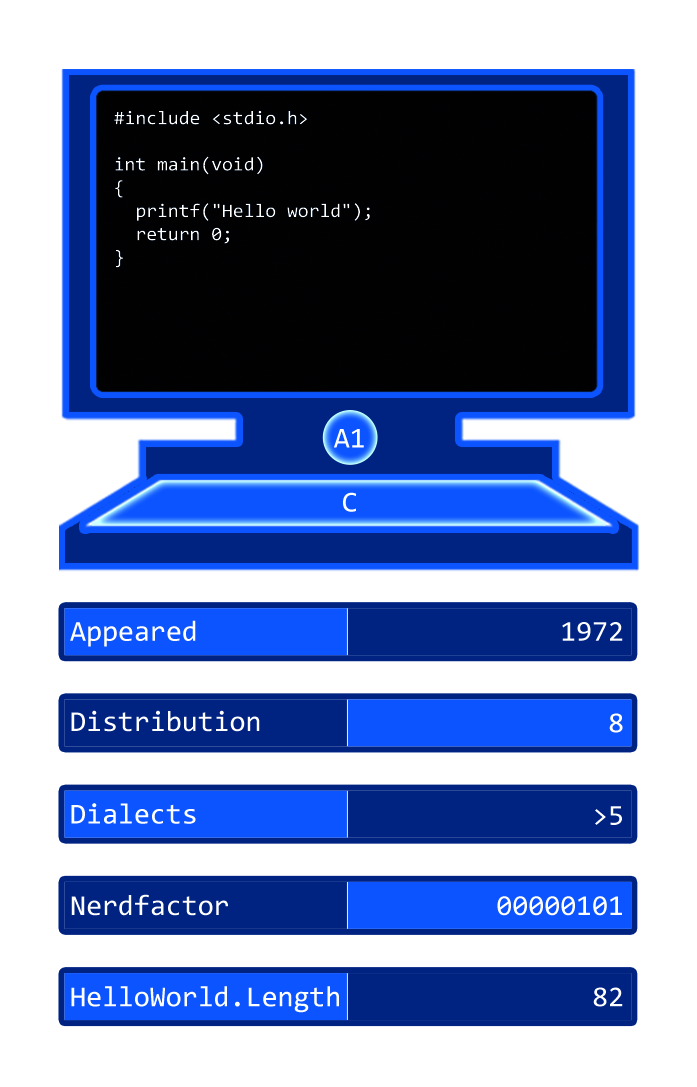
<style>
.page{position:relative;width:697px;height:1087px;background:#ffffff}
.page>*{position:absolute;margin:0}
.t1{font:19.3px "Consolas";color:#ffffff}
.t2{font:29px "Consolas";color:#ffffff}
</style>
<div class="page">
<p class="t1" style="left:114px;top:110px;width:256px;height:158px">#include &lt;stdio.h&gt;<br> <br>int main(void)<br>{<br>  printf("Hello world");<br>  return 0;<br>}</p>
<p class="t2" style="left:334px;top:429px;width:30px;height:19px">A1</p>
<p class="t2" style="left:343px;top:492px;width:13px;height:20px">C</p>
<p class="t2" style="left:70px;top:620px;width:126px;height:27px">Appeared</p>
<p class="t2" style="left:562px;top:622px;width:61px;height:19px">1972</p>
<p class="t2" style="left:71px;top:710px;width:189px;height:22px">Distribution</p>
<p class="t2" style="left:609px;top:713px;width:14px;height:20px">8</p>
<p class="t2" style="left:71px;top:803px;width:125px;height:21px">Dialects</p>
<p class="t2" style="left:595px;top:806px;width:27px;height:19px">&gt;5</p>
<p class="t2" style="left:71px;top:894px;width:157px;height:22px">Nerdfactor</p>
<p class="t2" style="left:497px;top:896px;width:125px;height:20px">00000101</p>
<p class="t2" style="left:71px;top:986px;width:268px;height:27px">HelloWorld.Length</p>
<p class="t2" style="left:593px;top:987px;width:30px;height:20px">82</p>
</div>
